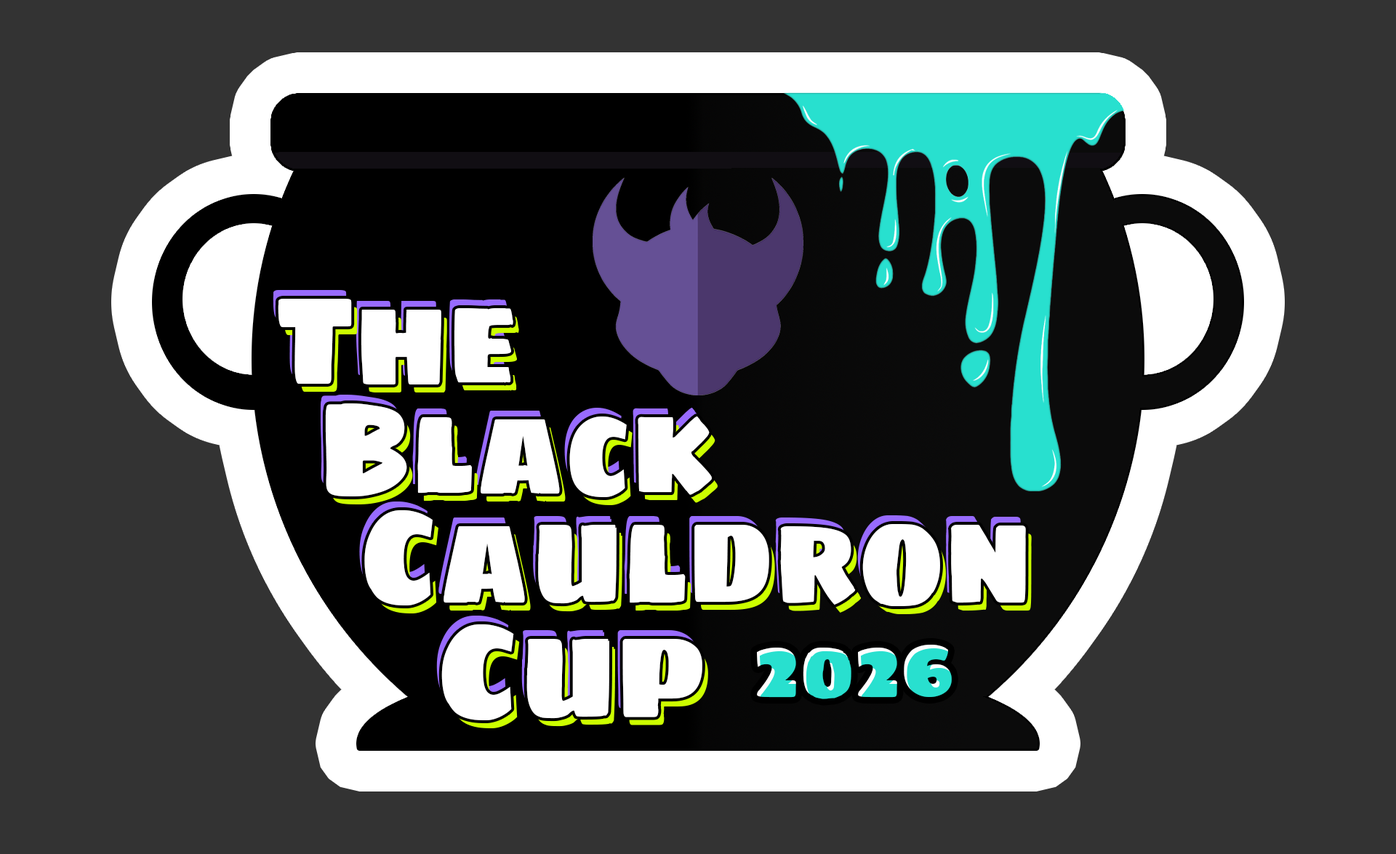
<style>
.page{position:relative;width:1396px;height:854px;background:#333333}
.page>*{position:absolute;margin:0}
.t1{font:133.5px/109.1px "SigmarOne-Regular";color:#ffffff;scale:0.86 1}
.t2{font:90.6px/106px "SigmarOne-Regular";color:#ffffff;scale:0.87 1}
.t3{font:128.9px/106px "SigmarOne-Regular";color:#ffffff;scale:0.87 1}
.t4{font:128.9px/109.1px "SigmarOne-Regular";color:#ffffff;scale:0.87 1}
.t5{font:134.5px/115.1px "SigmarOne-Regular";color:#ffffff;scale:0.9 1}
.t6{font:82.2px "SigmarOne-Regular";color:#28e0cf;scale:0.91 1}
</style>
<div class="page">
<p class="t1" style="left:278px;top:299px;width:748px;height:421px"><span class="t2"> </span><span class="t3">The <br>   </span><span class="t4">Black<br>    </span>Cauldron<br>      <span class="t5">Cup</span></p>
<p class="t6" style="left:757px;top:645px;width:195px;height:54px">2026</p>
</div>
